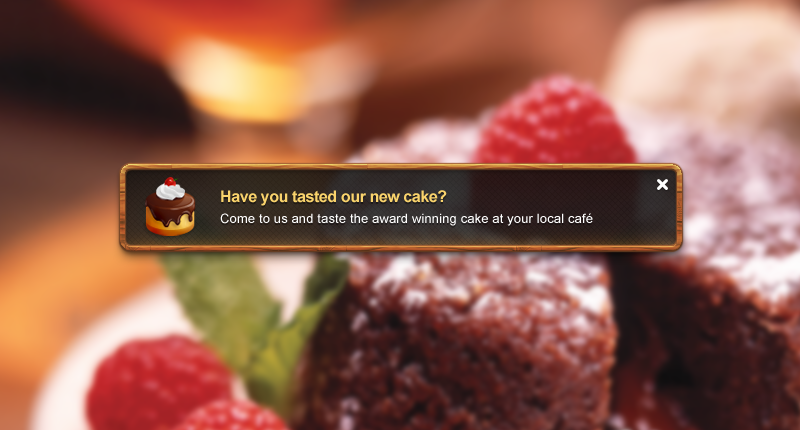
<style>
.page{position:relative;width:800px;height:430px}
.page>*{position:absolute;margin:0}
.t1{font:16px "Arial-BoldMT";letter-spacing:-0.025em;color:#f9d36c}
.t2{font:13px "ArialMT";letter-spacing:0.01em;color:#ffffff}
</style>
<div class="page">
<p class="t1" style="left:221px;top:190px;width:226px;height:16px">Have you tasted our new cake?</p>
<p class="t2" style="left:220px;top:213px;width:373px;height:13px">Come to us and taste the award winning cake at your local café</p>
</div>
